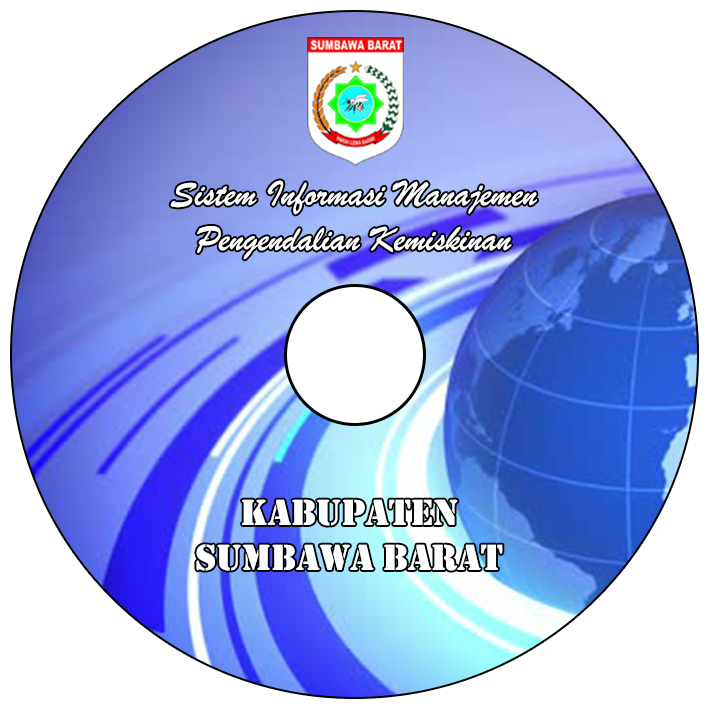
<style>
.page{position:relative;width:709px;height:709px;background:#ffffff}
.page>*{position:absolute;margin:0}
.t1{font:37.5px "BrushScriptMT";color:#ffffff}
.t2{font:37.5px "Stencil";color:#ffffff}
</style>
<div class="page">
<p class="t1" style="left:170px;top:180px;width:367px;height:80px;text-align:center">Sistem Informasi Manajemen<br>Pengendalian Kemiskinan</p>
<p class="t2" style="left:196px;top:499px;width:307px;height:72px;text-align:center">Kabupaten<br>Sumbawa Barat</p>
</div>
